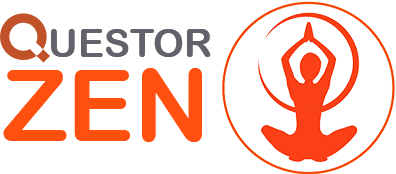
<style>
.page{position:relative;width:396px;height:174px;background:#ffffff}
.page>*{position:absolute;margin:0}
.t1{font:39px "ArialRoundedMTBold";color:#63626a}
.t2{font:100px "ArialRoundedMTBold";color:#ff5010}
</style>
<div class="page">
<p class="t1" style="left:51px;top:29px;width:160px;height:28px">UESTOR</p>
<p class="t2" style="left:3px;top:68px;width:199px;height:74px">ZEN</p>
</div>
